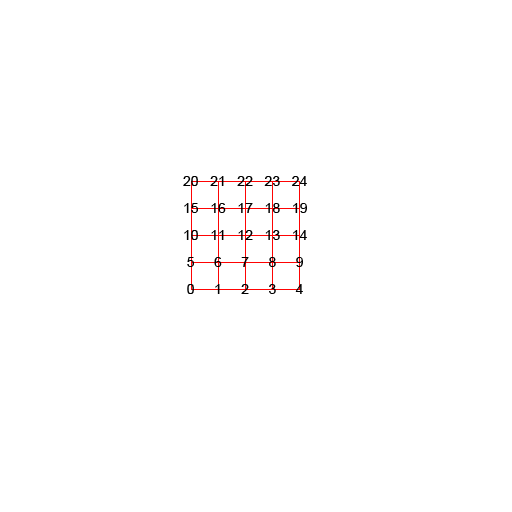
<style>
.page{position:relative;width:512px;height:512px;background:#ffffff}
.page>*{position:absolute;margin:0}
.t1{font:14px/27px "ArialMT";color:#000000}
</style>
<div class="page">
<p class="t1" style="left:183px;top:176px;width:124px;height:118px">20   21   22   23   24<br> 15   16   17   18   19<br> 10   11   12   13   14<br>  5     6     7     8     9<br>  0     1     2     3     4</p>
</div>
